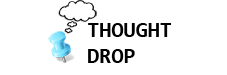
<style>
.page{position:relative;width:227px;height:75px;background:#ffffff}
.page>*{position:absolute;margin:0}
.t1{font:22px "Consolas-Bold";color:#000000;text-transform:uppercase}
</style>
<div class="page">
<p class="t1" style="left:88px;top:23px;width:83px;height:40px;text-align:justify">Thought<br>Drop</p>
</div>
